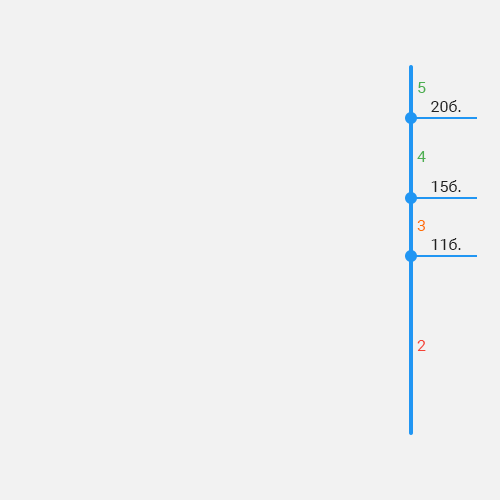
<style>
.page{position:relative;width:500px;height:500px;background:#f2f2f2}
.page>*{position:absolute;margin:0}
.t1{font:16px "Roboto-Regular";color:#4caf50}
.t2{font:16px "Roboto-Regular";color:#212121}
.t3{font:16px "Roboto-Regular";color:#ff6f00}
.t4{font:16px "Roboto-Regular";color:#f44336}
</style>
<div class="page">
<p class="t1" style="left:418px;top:82px;width:8px;height:11px">5</p>
<p class="t2" style="left:431px;top:100px;width:30px;height:12px">20б.</p>
<p class="t1" style="left:417px;top:151px;width:9px;height:11px">4</p>
<p class="t2" style="left:431px;top:180px;width:30px;height:12px">15б.</p>
<p class="t3" style="left:417px;top:220px;width:8px;height:11px">3</p>
<p class="t2" style="left:431px;top:238px;width:30px;height:12px">11б.</p>
<p class="t4" style="left:417px;top:340px;width:9px;height:11px">2</p>
</div>
